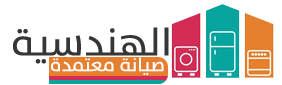
<style>
.page{position:relative;width:282px;height:85px;background:#ffffff}
.page>*{position:absolute;margin:0}
.t1{font:39.4px "TheSans-Plain";color:#373636}
.t2{font:19.2px "TheSans-Plain";color:#fefdff}
</style>
<div class="page">
<p class="t1" style="left:13px;top:27px;width:156px;height:37px">الهندسية</p>
<p class="t2" style="left:51px;top:57px;width:113px;height:19px">صيانة معتمدة</p>
</div>
